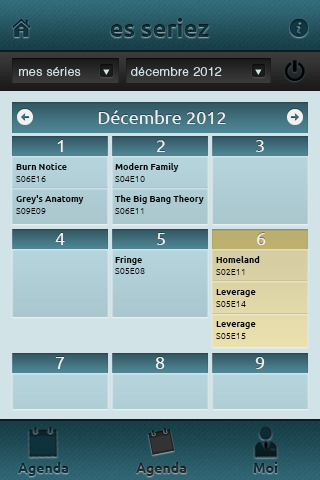
<style>
.page{position:relative;width:320px;height:480px}
.page>*{position:absolute;margin:0}
.t1{font:24px "Ubuntu-Bold";color:#103842}
.t2{font:12px "HelveticaLTStd-Light";letter-spacing:0.04em;color:#d2e3e7}
.t3{font:18px "Ubuntu";color:#f1f1f1}
.t4{font:9px "Ubuntu-Light";color:#080808}
.t5{font:9px "Ubuntu-Bold";color:#080808}
.t6{font:9px/12px "Ubuntu-Light";color:#080808}
.t7{font:9px/20px "Ubuntu-Bold";color:#080808}
.t8{font:9px/12px "Ubuntu-Bold";color:#080808}
.t9{font:14px "Ubuntu-Bold";color:#113c47}
.t10{font:14px "Ubuntu-Bold";color:#333333}
</style>
<div class="page">
<p class="t1" style="left:110px;top:18px;width:99px;height:19px">es seriez</p>
<p class="t2" style="left:19px;top:67px;width:62px;height:9px">mes séries</p>
<p class="t2" style="left:131px;top:67px;width:91px;height:9px">décembre 2012</p>
<p class="t3" style="left:98px;top:110px;width:128px;height:14px">Décembre 2012</p>
<p class="t3" style="left:57px;top:140px;width:6px;height:12px">1</p>
<p class="t3" style="left:157px;top:140px;width:8px;height:12px">2</p>
<p class="t3" style="left:256px;top:140px;width:8px;height:12px">3</p>
<p class="t4" style="left:16px;top:163px;width:68px;height:51px"><span class="t5">Burn Notice<br></span><span class="t6">S06E16<br></span><span class="t7">Grey's Anatomy<br></span><span class="t6">S09E09<br></span>    The Big Bang Theory<br>    S06E11</p>
<p class="t7" style="left:115px;top:163px;width:89px;height:51px"><span class="t5">Modern Family<br></span><span class="t6">S04E10<br></span>The Big Bang Theory<br><span class="t6">S06E11</span></p>
<p class="t3" style="left:55px;top:233px;width:10px;height:12px">4</p>
<p class="t3" style="left:157px;top:233px;width:8px;height:12px">5</p>
<p class="t3" style="left:257px;top:233px;width:9px;height:12px">6</p>
<p class="t5" style="left:115px;top:256px;width:30px;height:18px">Fringe<br><span class="t4">S05E08</span></p>
<p class="t8" style="left:216px;top:256px;width:44px;height:83px">Homeland<br><span class="t6">S02E11<br></span><span class="t7">Leverage<br></span><span class="t6">S05E14<br></span><span class="t7">Leverage<br></span><span class="t6">S05E15</span></p>
<p class="t3" style="left:55px;top:357px;width:10px;height:12px">7</p>
<p class="t3" style="left:155px;top:357px;width:10px;height:12px">8</p>
<p class="t3" style="left:255px;top:357px;width:10px;height:12px">9</p>
<p class="t9" style="left:18px;top:462px;width:51px;height:14px">Agenda</p>
<p class="t10" style="left:136px;top:462px;width:51px;height:14px">Agenda</p>
<p class="t9" style="left:253px;top:462px;width:25px;height:11px">Moi</p>
</div>
